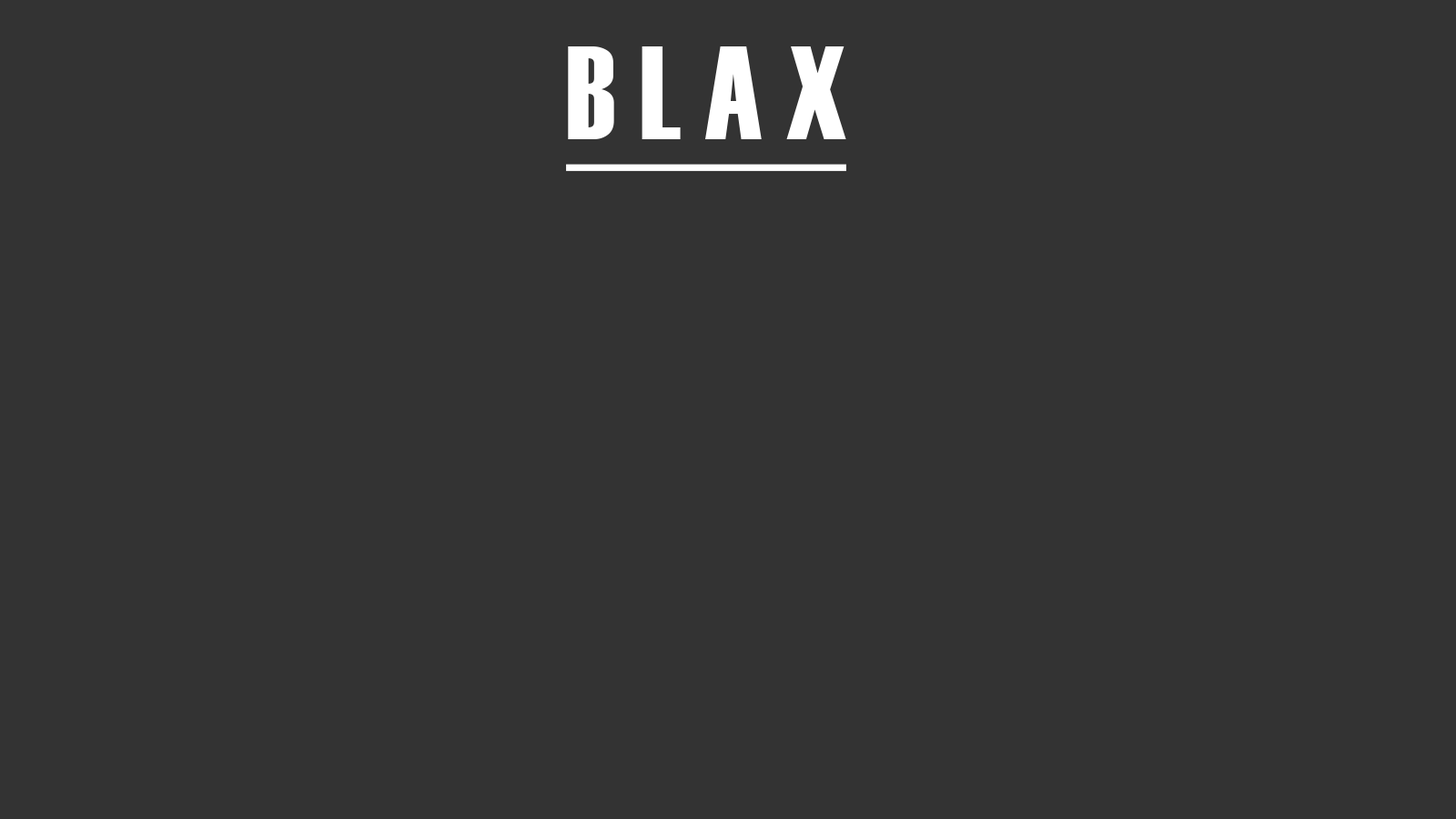
<style>
.page{position:relative;width:1456px;height:819px;background:#333333}
.page>*{position:absolute;margin:0}
.t1{font:131.9px "Haettenschweiler";color:#ffffff;text-decoration:underline}
</style>
<div class="page">
<p class="t1" style="left:566px;top:46px;width:280px;height:125px">B L A X</p>
</div>
